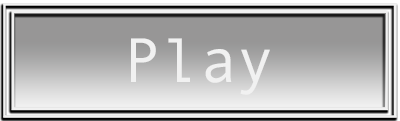
<style>
.page{position:relative;width:400px;height:121px}
.page>*{position:absolute;margin:0}
.t1{font:63.4px "AndaleMono";color:#f1f1f1}
</style>
<div class="page">
<p class="t1" style="left:131px;top:38px;width:139px;height:57px">Play</p>
</div>
